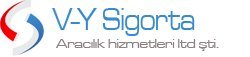
<style>
.page{position:relative;width:250px;height:57px;background:#ffffff}
.page>*{position:absolute;margin:0}
.t1{font:32.3px "MicrogrammaD-MediExte";color:#368ccc;scale:0.71 1}
.t2{font:13px "MicrogrammaD-MediExte";color:#8b8383}
</style>
<div class="page">
<p class="t1" style="left:52px;top:8px;width:143px;height:28px">V-Y Sigorta</p>
<p class="t2" style="left:55px;top:39px;width:164px;height:12px">Aracılık hizmetleri ltd şti.</p>
</div>
